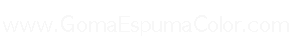
<style>
.page{position:relative;width:300px;height:51px;background:#ffffff}
.page>*{position:absolute;margin:0}
.t1{font:20.6px "AppleGothic";color:#e4e4e4}
</style>
<div class="page">
<p class="t1" style="left:3px;top:15px;width:286px;height:21px;opacity:0.28">www.GomaEspumaColor.com</p>
</div>
